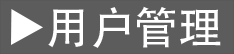
<style>
.page{position:relative;width:234px;height:54px;background:#5c5c5c}
.page>*{position:absolute;margin:0}
.t1{font:44.2px "AdobeHeitiStd-Regular";color:#ffffff}
</style>
<div class="page">
<p class="t1" style="left:48px;top:6px;width:173px;height:42px">用户管理</p>
</div>
